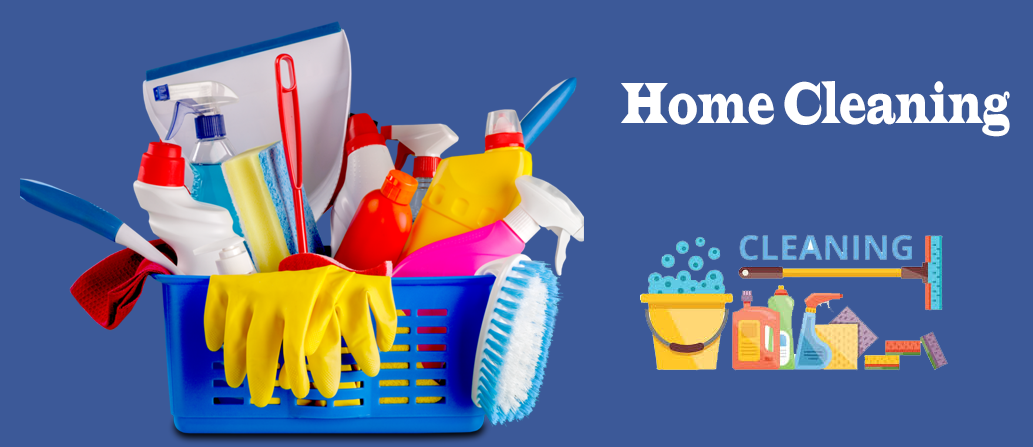
<style>
.page{position:relative;width:1033px;height:447px;background:#3c5998}
.page>*{position:absolute;margin:0}
.t1{font:60px "LatinWide";color:#ffffff;scale:0.5 1}
</style>
<div class="page">
<p class="t1" style="left:621px;top:81px;width:389px;height:56px">Home Cleaning</p>
</div>
